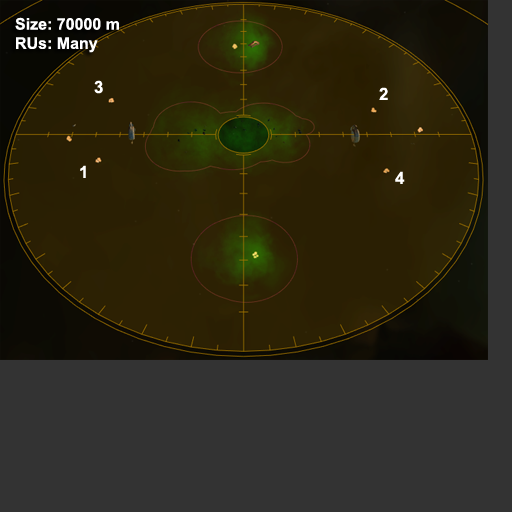
<style>
.page{position:relative;width:512px;height:512px;background:#333333}
.page>*{position:absolute;margin:0}
.t1{font:16px "Arial-BoldMT";color:#ffffff}
.t2{font:17px "Arial-BoldMT";color:#ffffff}
</style>
<div class="page">
<p class="t1" style="left:15px;top:17px;width:104px;height:36px">Size: 70000 m<br>RUs: Many</p>
<p class="t2" style="left:94px;top:80px;width:9px;height:14px">3</p>
<p class="t2" style="left:379px;top:87px;width:9px;height:13px">2</p>
<p class="t2" style="left:80px;top:165px;width:6px;height:13px">1</p>
<p class="t2" style="left:395px;top:171px;width:10px;height:13px">4</p>
</div>
